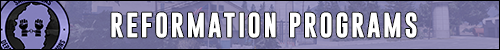
<style>
.page{position:relative;width:500px;height:50px}
.page>*{position:absolute;margin:0}
.t1{font:25px "GoboldBold";letter-spacing:0.1em;color:#ffffff}
</style>
<div class="page">
<p class="t1" style="left:111px;top:12px;width:306px;height:26px">REFORMATION PROGRAMS</p>
</div>
